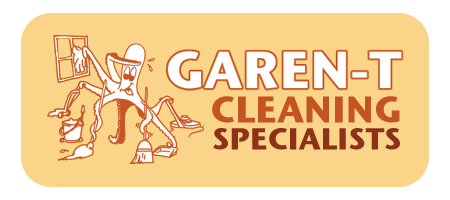
<style>
.page{position:relative;width:450px;height:200px;background:#fad489}
.page>*{position:absolute;margin:0}
.t1{font:29.9px/26.8px "StoneSansITC-Bold";color:#8d3219}
.t2{font:36.6px/31.7px "StoneSansITC-Bold";color:#c55423}
</style>
<div class="page">
<p class="t1" style="left:212px;top:96px;width:188px;height:54px;text-align:right"><span class="t2">CLEANING<br></span>SPECIALISTS</p>
</div>
